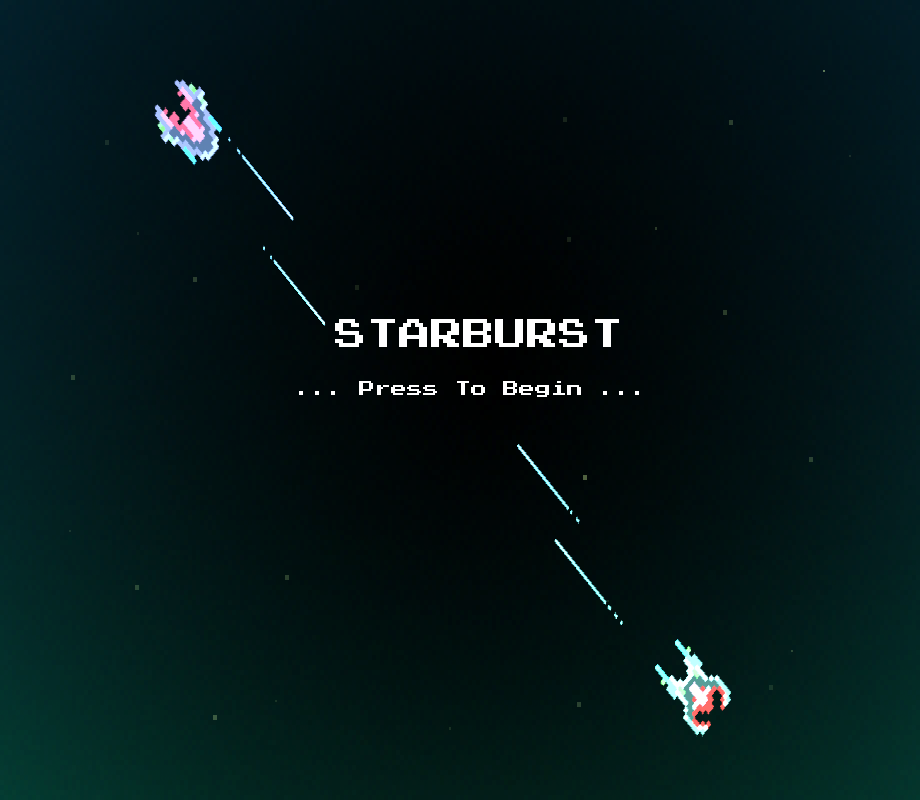
<style>
.page{position:relative;width:920px;height:800px}
.page>*{position:absolute;margin:0}
.t1{font:32px "PressStart2P";color:#ffffff}
.t2{font:16px "PressStart2P";color:#ffffff}
</style>
<div class="page">
<p class="t1" style="left:335px;top:319px;width:284px;height:28px">STARBURST</p>
<p class="t2" style="left:299px;top:381px;width:340px;height:16px">... Press To Begin ...</p>
</div>
